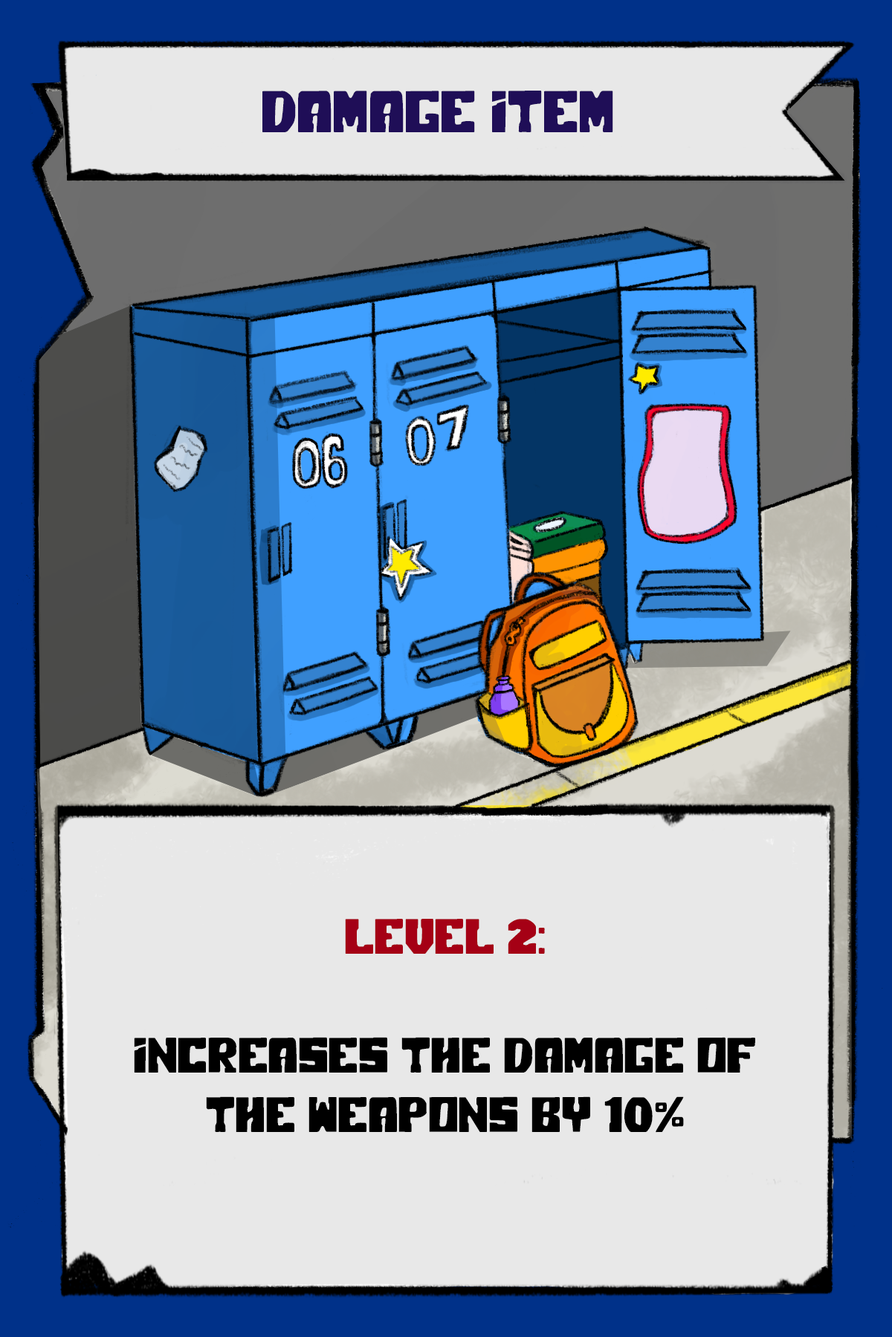
<style>
.page{position:relative;width:892px;height:1337px;background:#e8e8e8}
.page>*{position:absolute;margin:0}
.t1{font:58.8px "PolarPress";color:#1f0e57}
.t2{font:49.5px "PolarPress";color:#000000}
.t3{font:49.5px "PolarPress";color:#a50015}
</style>
<div class="page">
<p class="t1" style="left:262px;top:91px;width:351px;height:41px">Damage item</p>
<p class="t2" style="left:134px;top:919px;width:621px;height:214px;text-align:center"><span class="t3">LEVEL 2:<br></span><br>Increases the damage of the weapons by 10%</p>
</div>
